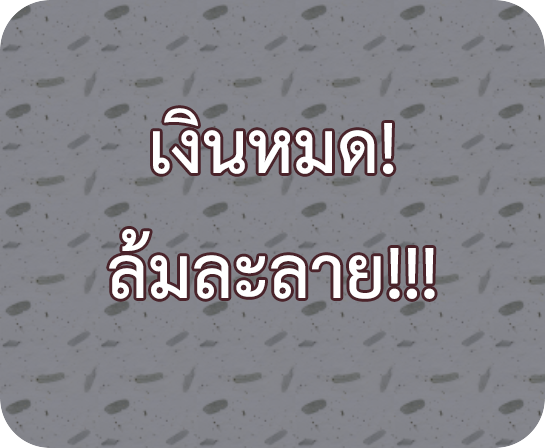
<style>
.page{position:relative;width:545px;height:448px}
.page>*{position:absolute;margin:0}
.t1{font:104.2px "THSarabunPSK-Bold";color:#ffffff}
</style>
<div class="page">
<p class="t1" style="left:109px;top:108px;width:326px;height:191px;text-align:center">เงินหมด!<br>ล้มละลาย!!!</p>
</div>
